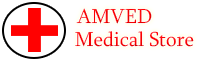
<style>
.page{position:relative;width:200px;height:60px;background:#ffffff}
.page>*{position:absolute;margin:0}
.t1{font:20.9px "Sylfaen";color:#fe0000}
.t2{font:20.9px "Sylfaen";color:#fb0000}
</style>
<div class="page">
<p class="t1" style="left:76px;top:8px;width:76px;height:16px">AMVED</p>
<p class="t2" style="left:75px;top:31px;width:119px;height:16px">Medical Store</p>
</div>
